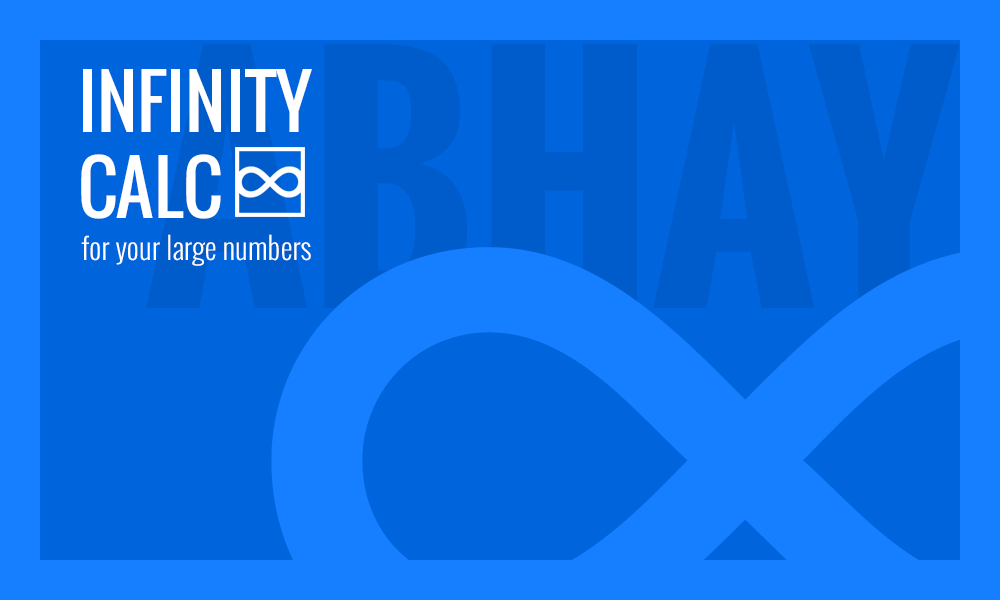
<style>
.page{position:relative;width:1000px;height:600px;background:#0065dd}
.page>*{position:absolute;margin:0}
.t1{font:300px "Oswald-Bold";color:#0057c0}
.t2{font:72px "Oswald-Regular";color:#ffffff}
.t3{font:30px "Oswald-Light";color:#ffffff}
</style>
<div class="page">
<p class="t1" style="left:146px;top:44px;width:814px;height:264px;opacity:0.67">ABHAY</p>
<p class="t2" style="left:81px;top:69px;width:231px;height:150px">INFINITY<br>CALC</p>
<p class="t3" style="left:81px;top:234px;width:230px;height:32px">for your large numbers</p>
</div>
